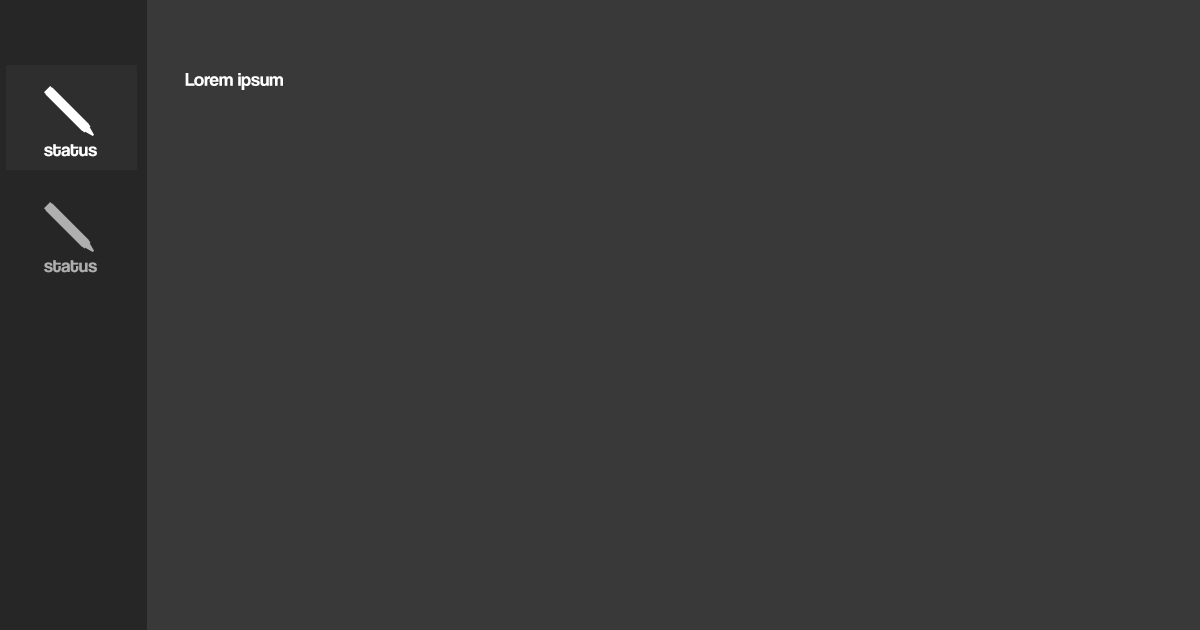
<style>
.page{position:relative;width:1200px;height:630px;background:#393939}
.page>*{position:absolute;margin:0}
.t1{font:18.8px "CoolveticaRg-Regular";color:#ffffff}
.t2{font:18.8px "CoolveticaRg-Regular";color:#b0b0b0}
</style>
<div class="page">
<p class="t1" style="left:185px;top:73px;width:98px;height:17px">Lorem ipsum</p>
<p class="t1" style="left:44px;top:144px;width:53px;height:13px">status</p>
<p class="t2" style="left:44px;top:260px;width:53px;height:13px">status</p>
</div>
